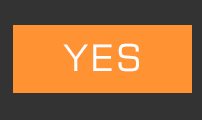
<style>
.page{position:relative;width:202px;height:120px;background:#333333}
.page>*{position:absolute;margin:0}
.t1{font:36.5px "Square721BT-Roman";letter-spacing:0.1em;color:#ffffff}
</style>
<div class="page">
<p class="t1" style="left:63px;top:43px;width:76px;height:29px">YES</p>
</div>
